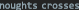
<style>
.page{position:relative;width:79px;height:10px;background:#242424}
.page>*{position:absolute;margin:0}
.t1{font:10px "Consolas";color:#90a4ae}
</style>
<div class="page">
<p class="t1" style="left:0px;top:1px;width:37px;height:10px">noughts</p>
<p class="t1" style="left:42px;top:3px;width:37px;height:6px">crosses</p>
</div>
